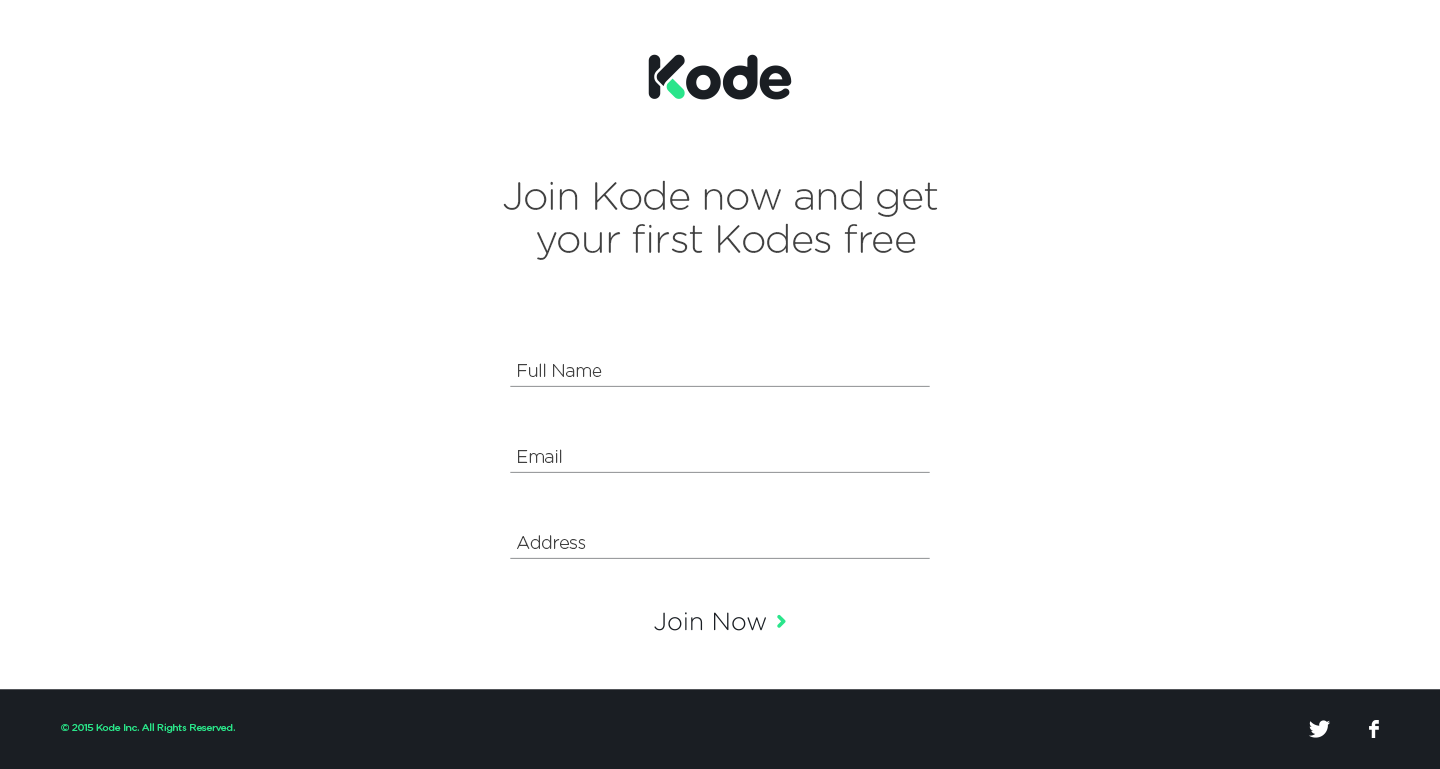
<style>
.page{position:relative;width:1440px;height:769px;background:#ffffff}
.page>*{position:absolute;margin:0}
.t1{font:39.8px/43.7px "GothamRounded-Light";letter-spacing:-0.02em;color:#414141}
.t2{font:17.9px "GothamRounded-Light";letter-spacing:-0.02em;color:#414141}
.t3{font:9.8px "GothamRounded-Book";letter-spacing:-0.02em;color:#2ae58b}
</style>
<div class="page">
<p class="t1" style="left:503px;top:180px;width:435px;height:80px;text-align:center">Join Kode now and get <br>your first Kodes free</p>
<p class="t2" style="left:518px;top:363px;width:84px;height:14px">Full Name</p>
<p class="t2" style="left:518px;top:449px;width:44px;height:14px">Email</p>
<p class="t2" style="left:517px;top:535px;width:69px;height:14px">Address</p>
<p class="t3" style="left:61px;top:723px;width:174px;height:10px">© 2015 Kode Inc. All Rights Reserved.</p>
</div>
